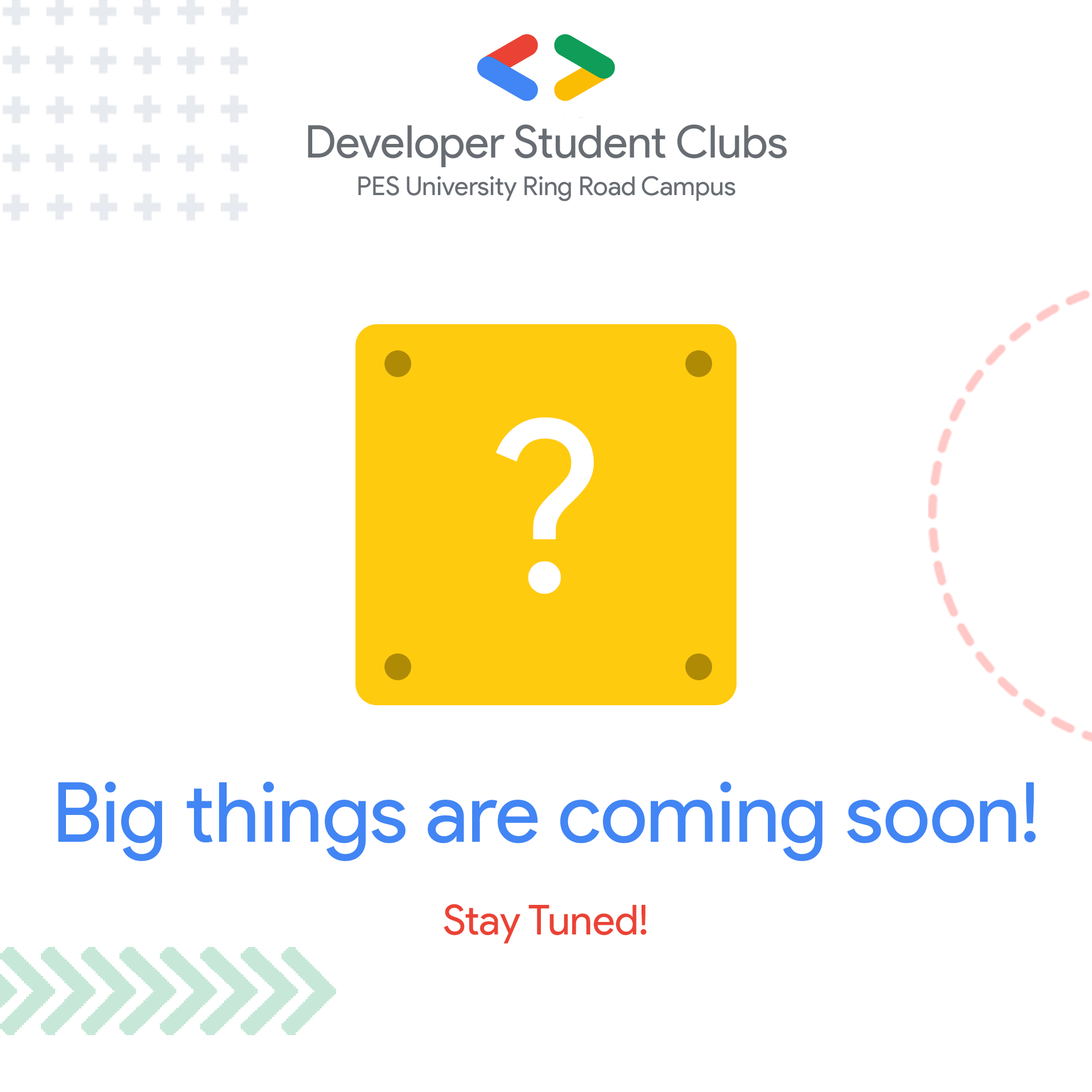
<style>
.page{position:relative;width:1092px;height:1092px;background:#ffffff}
.page>*{position:absolute;margin:0}
.t1{font:26.1px/37.9px "ProductSans-Regular";color:#686d73}
.t2{font:45px/37.9px "ProductSans-Regular";color:#686d73}
.t3{font:238.9px "ProductSans-Regular";color:#ffffff}
.t4{font:82.8px/46.5px "ProductSans-Regular";color:#4285f4}
.t5{font:41.4px/46.5px "ProductSans-Regular";color:#ea4335}
</style>
<div class="page">
<p class="t1" style="left:308px;top:125px;width:479px;height:76px;text-align:center"><span class="t2">Developer Student Clubs<br></span>PES University Ring Road Campus</p>
<p class="t3" style="left:496px;top:417px;width:98px;height:177px">?</p>
<p class="t4" style="left:58px;top:781px;width:978px;height:163px;text-align:center">Big things are coming soon!<br><br><span class="t5">Stay Tuned!</span></p>
</div>
